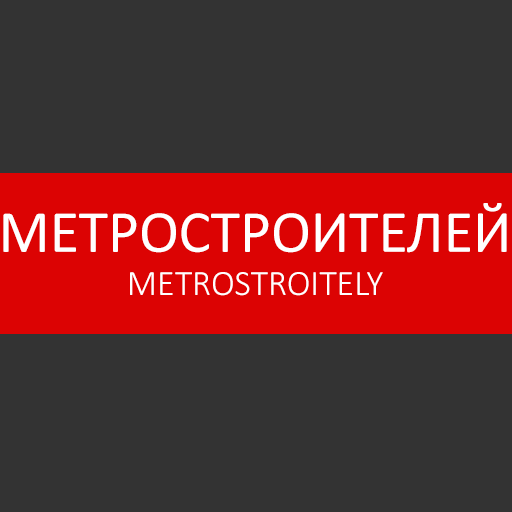
<style>
.page{position:relative;width:512px;height:512px;background:#333333}
.page>*{position:absolute;margin:0}
.t1{font:60px "Calibri";color:#ffffff}
.t2{font:36px "Calibri-Light";color:#ffffff}
</style>
<div class="page">
<p class="t1" style="left:3px;top:203px;width:504px;height:93px;text-align:center">МЕТРОСТРОИТЕЛЕЙ<br><span class="t2">METROSTROITELY</span></p>
</div>
